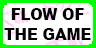
<style>
.page{position:relative;width:96px;height:48px;background:#ffffff}
.page>*{position:absolute;margin:0}
.t1{font:16.2px "Arial-Black";color:#050505;scale:0.91 1}
</style>
<div class="page">
<p class="t1" style="left:4px;top:8px;width:87px;height:32px;text-align:center">FLOW OF <br>THE GAME</p>
</div>
